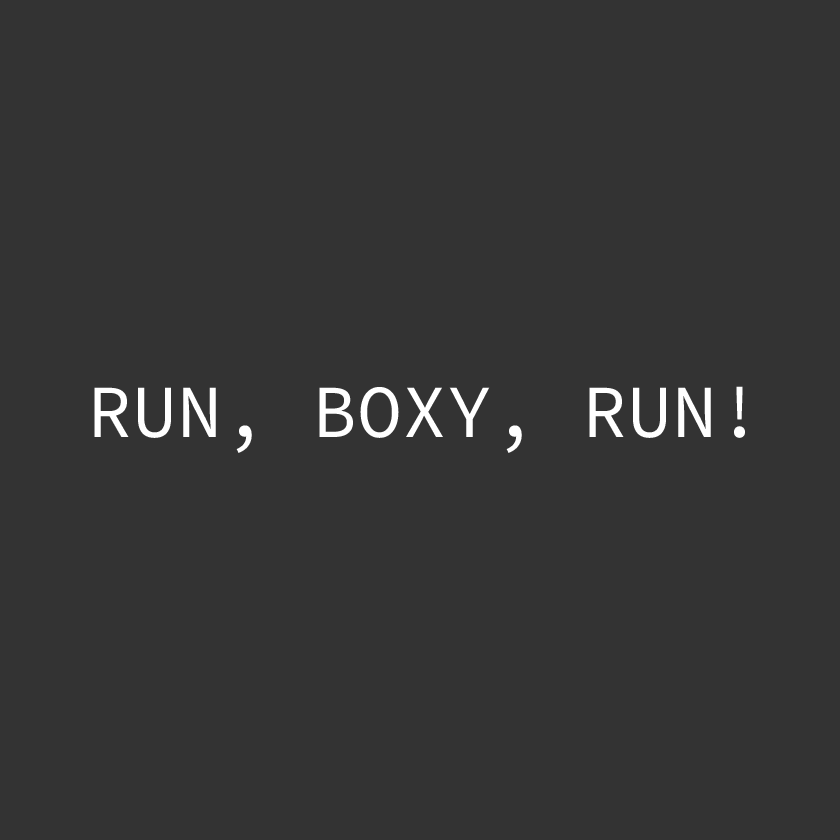
<style>
.page{position:relative;width:840px;height:840px;background:#333333}
.page>*{position:absolute;margin:0}
.t1{font:75px "SourceCodeVariable-Roman";color:#ffffff}
</style>
<div class="page">
<p class="t1" style="left:94px;top:386px;width:651px;height:67px">RUN, BOXY, RUN!</p>
</div>
